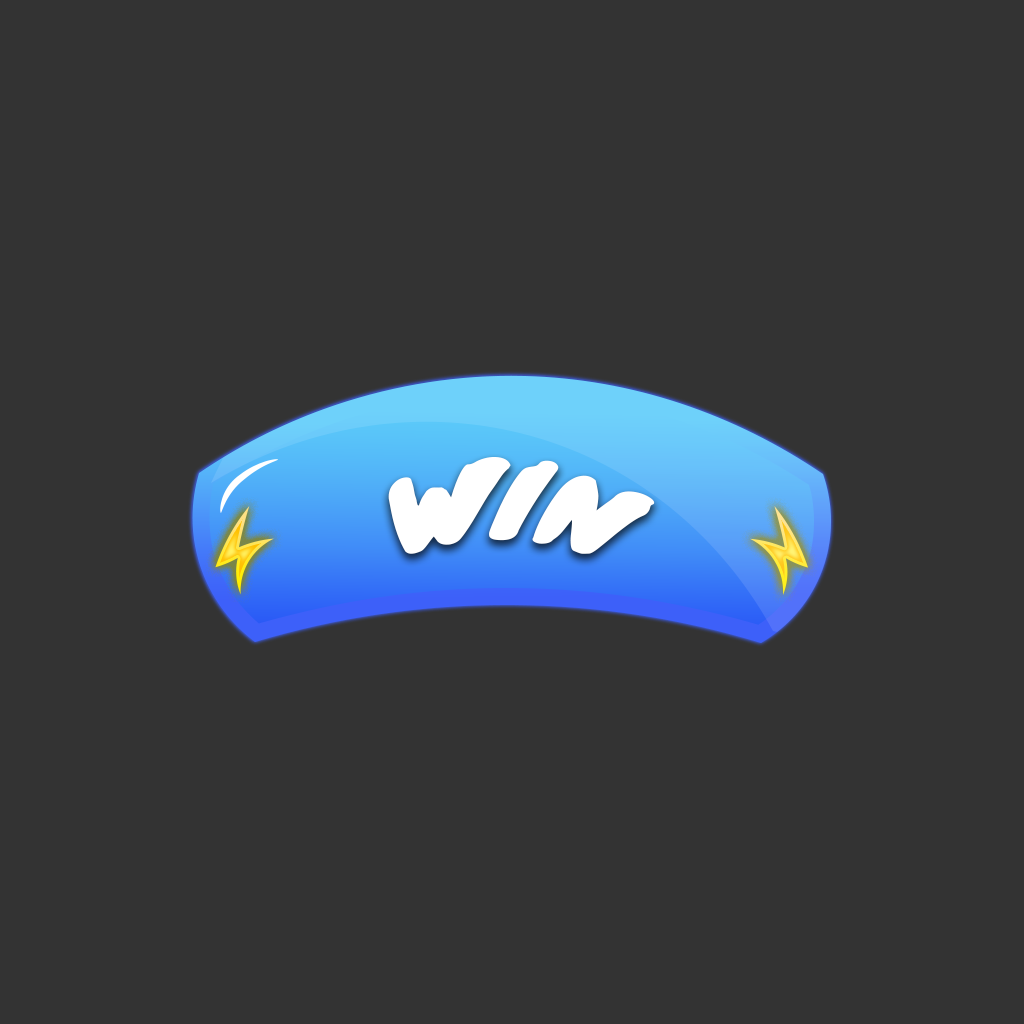
<style>
.page{position:relative;width:1024px;height:1024px;background:#333333}
.page>*{position:absolute;margin:0}
.t1{font:99.1px "Knewave-Regular";color:#ffffff}
</style>
<div class="page">
<p class="t1" style="left:388px;top:457px;width:267px;height:97px;rotate:3deg">WIN</p>
</div>
